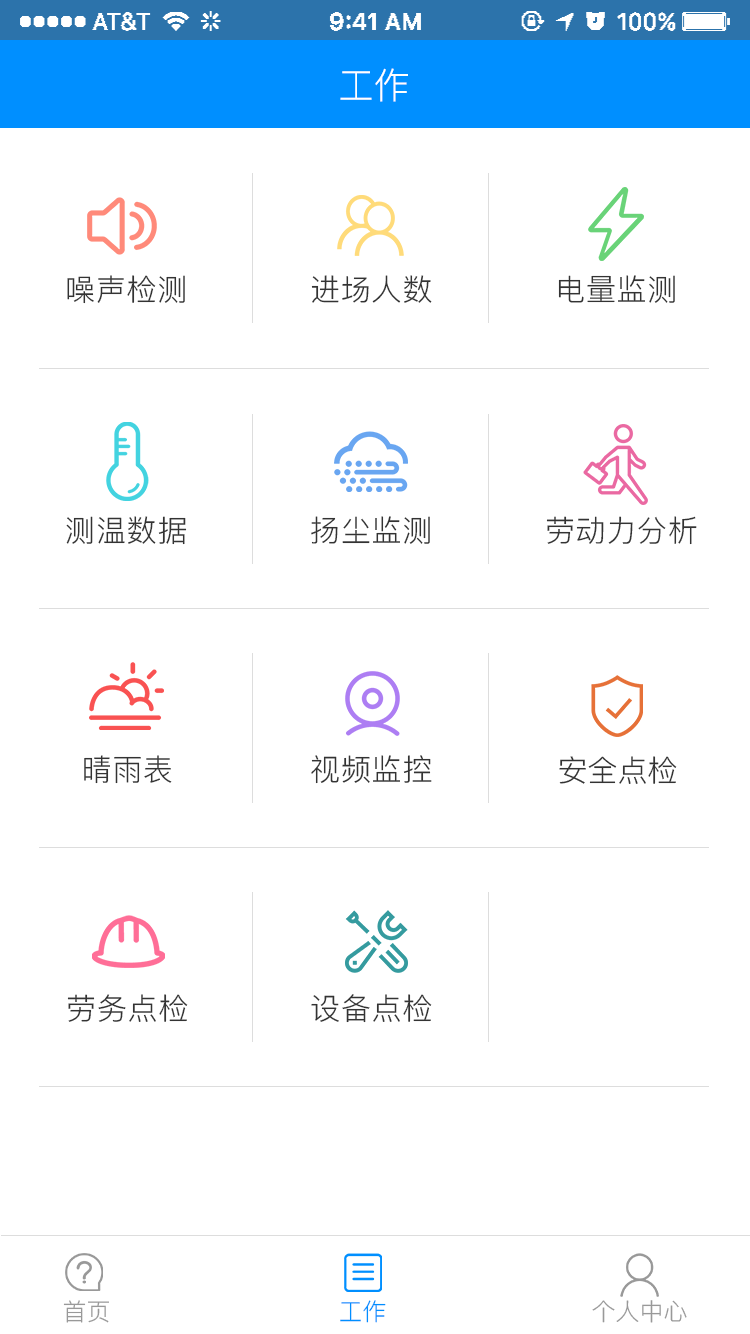
<style>
.page{position:relative;width:750px;height:1334px;background:#ffffff}
.page>*{position:absolute;margin:0}
.t1{font:36px "PingFang-SC-Regular";color:#ffffff}
.t2{font:30px "PingFang-SC-Regular";letter-spacing:0.025em;color:#333333}
.t3{font:30px "PingFang-SC-Regular";color:#333333}
.t4{font:24px "PingFang-SC-Regular";color:#999999}
.t5{font:24px "PingFang-SC-Regular";color:#008fff}
</style>
<div class="page">
<p class="t1" style="left:340px;top:68px;width:68px;height:34px">工作</p>
<p class="t2" style="left:67px;top:275px;width:118px;height:29px">噪声检测</p>
<p class="t2" style="left:311px;top:275px;width:121px;height:28px">进场人数</p>
<p class="t2" style="left:558px;top:275px;width:117px;height:28px">电量监测</p>
<p class="t2" style="left:66px;top:516px;width:121px;height:29px">测温数据</p>
<p class="t2" style="left:311px;top:516px;width:119px;height:28px">扬尘监测</p>
<p class="t2" style="left:546px;top:516px;width:151px;height:29px">劳动力分析</p>
<p class="t2" style="left:84px;top:755px;width:88px;height:29px">晴雨表</p>
<p class="t2" style="left:311px;top:755px;width:121px;height:29px">视频监控</p>
<p class="t3" style="left:559px;top:756px;width:118px;height:28px">安全点检</p>
<p class="t2" style="left:67px;top:994px;width:121px;height:28px">劳务点检</p>
<p class="t2" style="left:311px;top:994px;width:121px;height:29px">设备点检</p>
<p class="t4" style="left:63px;top:1300px;width:46px;height:23px">首页</p>
<p class="t5" style="left:340px;top:1300px;width:46px;height:23px">工作</p>
<p class="t4" style="left:592px;top:1300px;width:95px;height:23px">个人中心</p>
</div>
